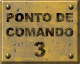
<style>
.page{position:relative;width:80px;height:64px}
.page>*{position:absolute;margin:0}
.t1{font:12px/14.7px "Arial-Black";letter-spacing:-0.015em;text-transform:uppercase}
.t2{font:20px/20px "Arial-Black";letter-spacing:-0.055em;text-transform:uppercase}
</style>
<div class="page">
<p class="t1" style="left:6px;top:13px;width:68px;height:44px;text-align:center">Ponto de<br>comando<br><span class="t2">3</span></p>
</div>
